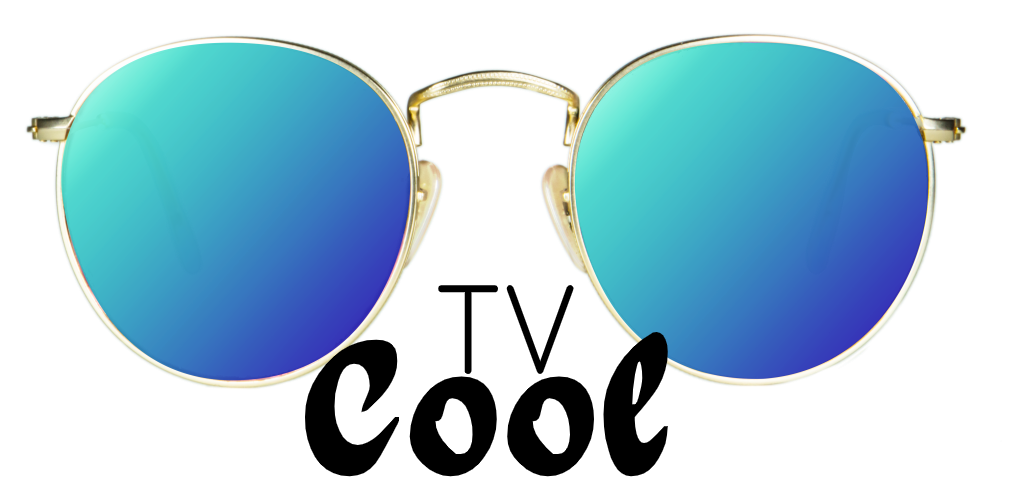
<style>
.page{position:relative;width:1024px;height:493px;background:#ffffff}
.page>*{position:absolute;margin:0}
.t1{font:126.9px "Quicksand-Regular";color:#000000;scale:0.88 1}
.t2{font:184px "MothproofScript";color:#000000}
</style>
<div class="page">
<p class="t1" style="left:438px;top:285px;width:136px;height:89px">TV</p>
<p class="t2" style="left:304px;top:332px;width:364px;height:145px">Cool</p>
</div>
